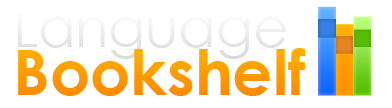
<style>
.page{position:relative;width:392px;height:108px;background:#ffffff}
.page>*{position:absolute;margin:0}
.t1{font:54.6px "CenturyGothic";color:#ececec}
.t2{font:63px "CenturyGothic-Bold";color:#ff9900}
</style>
<div class="page">
<p class="t1" style="left:17px;top:7px;width:269px;height:52px">Language</p>
<p class="t2" style="left:18px;top:48px;width:288px;height:48px">Bookshelf</p>
</div>
